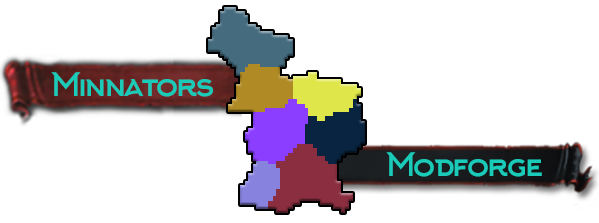
<style>
.page{position:relative;width:599px;height:223px;background:#ffffff}
.page>*{position:absolute;margin:0}
.t1{font:32px "Arkhip";letter-spacing:-0.12em;color:#19cbb8}
</style>
<div class="page">
<p class="t1" style="left:51px;top:72px;width:162px;height:25px">Minnators</p>
<p class="t1" style="left:386px;top:152px;width:156px;height:25px">Modforge</p>
</div>
